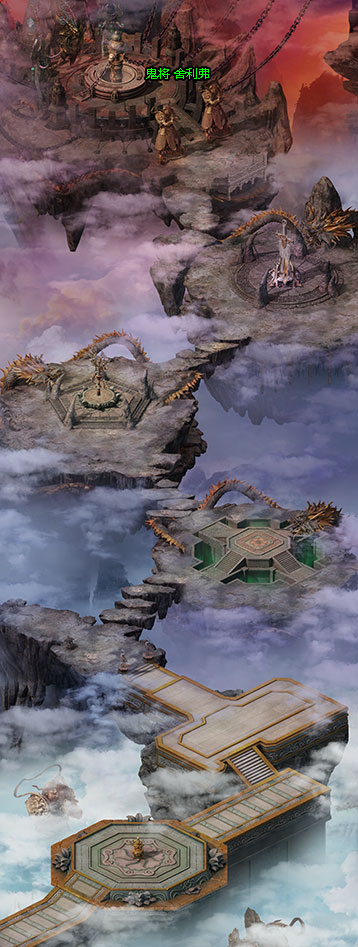
<style>
.page{position:relative;width:358px;height:947px}
.page>*{position:absolute;margin:0}
.t1{font:12px "MicrosoftYaHei";color:#00ff00}
</style>
<div class="page">
<p class="t1" style="left:146px;top:68px;width:63px;height:11px">鬼将 舍利弗</p>
</div>
